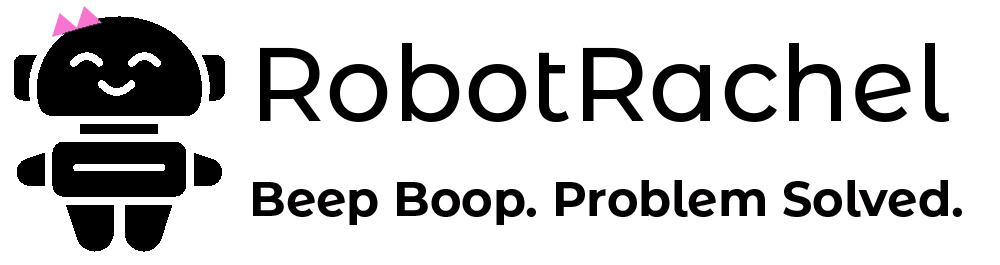
<style>
.page{position:relative;width:1000px;height:265px;background:#ffffff}
.page>*{position:absolute;margin:0}
.t1{font:105px "MontserratAlternates-Medium";color:#000000}
.t2{font:48px "MontserratAlternates-Bold";color:#020000}
</style>
<div class="page">
<p class="t1" style="left:260px;top:43px;width:690px;height:79px">RobotRachel</p>
<p class="t2" style="left:253px;top:180px;width:709px;height:45px">Beep Boop. Problem Solved.</p>
</div>
